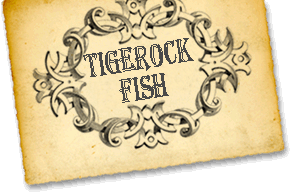
<style>
.page{position:relative;width:290px;height:195px}
.page>*{position:absolute;margin:0}
.t1{font:35px/30px "Algerian";color:#494948;scale:0.67 1}
</style>
<div class="page">
<p class="t1" style="left:83px;top:38px;width:111px;height:65px;text-align:center;rotate:-9deg">Tigerock<br>Fish</p>
</div>
